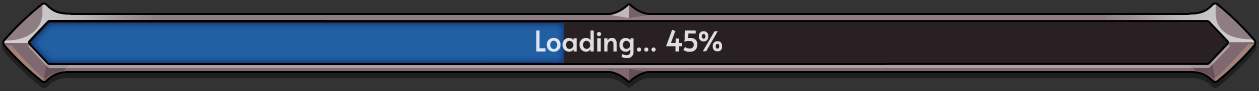
<style>
.page{position:relative;width:1259px;height:91px;background:#333333}
.page>*{position:absolute;margin:0}
.t1{font:28px "Alata-Regular";letter-spacing:0.01em;color:#dfdede}
</style>
<div class="page">
<p class="t1" style="left:536px;top:29px;width:186px;height:29px">Loading... 45%</p>
</div>
